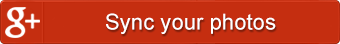
<style>
.page{position:relative;width:340px;height:44px;background:#c52e10}
.page>*{position:absolute;margin:0}
.t1{font:22px "ArialMT";color:#ffffff}
</style>
<div class="page">
<p class="t1" style="left:106px;top:13px;width:170px;height:21px">Sync your photos</p>
</div>
